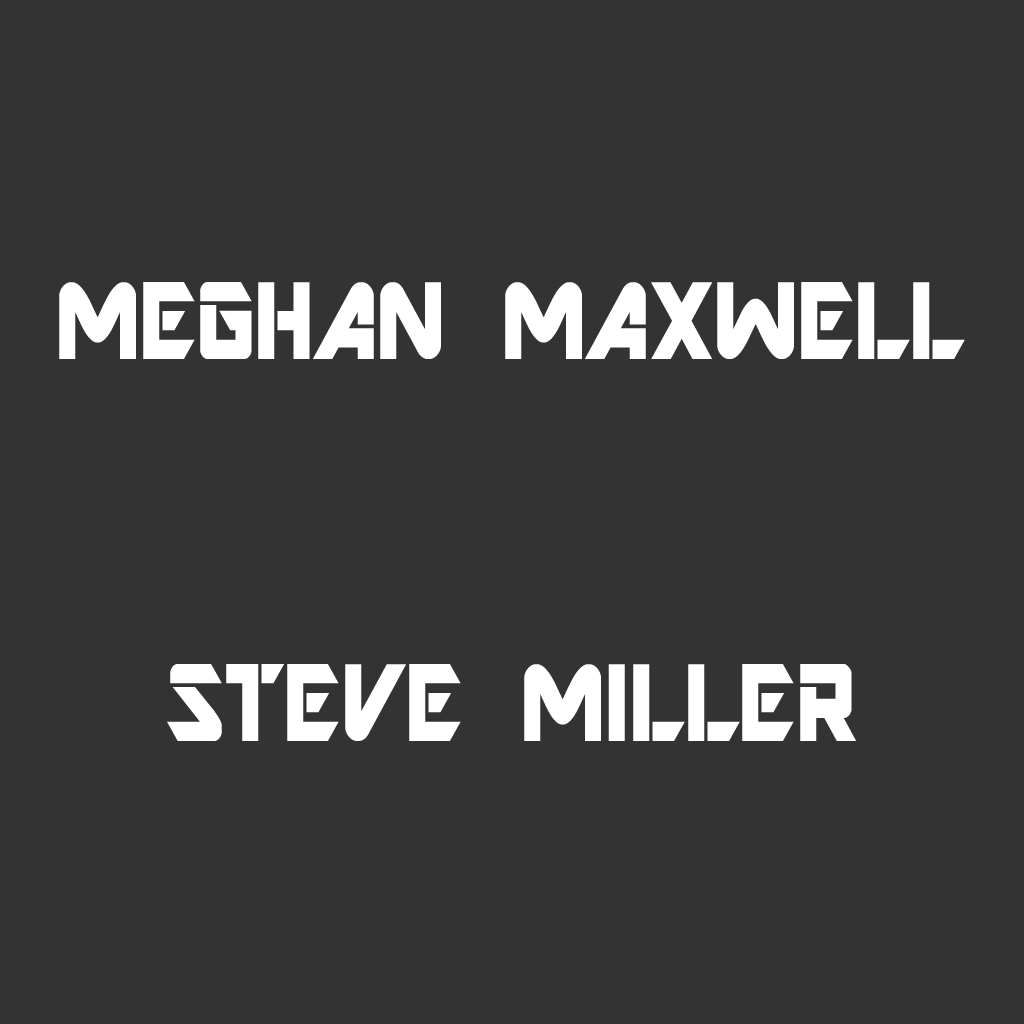
<style>
.page{position:relative;width:1024px;height:1024px;background:#333333}
.page>*{position:absolute;margin:0}
.t1{font:121.9px "ARDESTINE";color:#ffffff;scale:0.83 1}
</style>
<div class="page">
<p class="t1" style="left:59px;top:282px;width:906px;height:459px;text-align:center">MEGHAN MAXWELL<br><br><br>STEVE MILLER</p>
</div>
